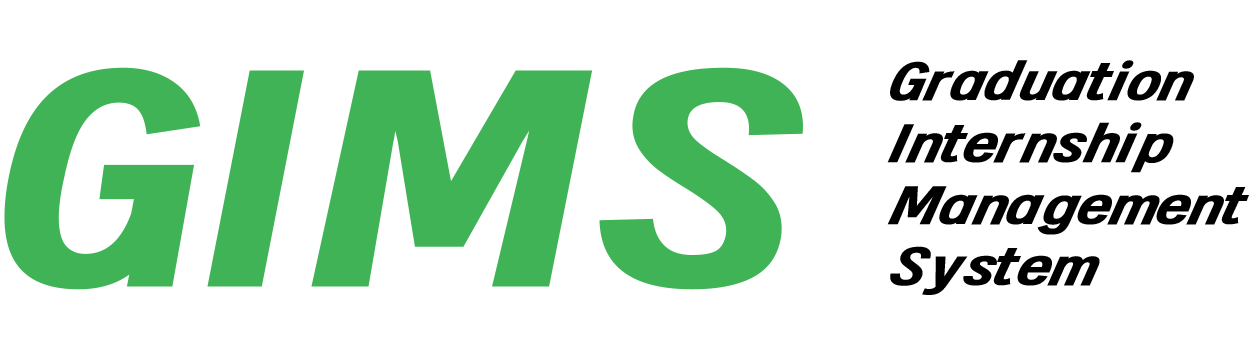
<style>
.page{position:relative;width:1250px;height:358px;background:#ffffff}
.page>*{position:absolute;margin:0}
.t1{font:49.1px/61.7px "zihunbiantaoti";letter-spacing:-0.06em;color:#000000;font-style:italic;scale:1.39 1}
.t2{font:278.3px "zihunbiantaoti";letter-spacing:-0.06em;color:#3fb355;scale:1.39 1}
</style>
<div class="page">
<p class="t1" style="left:887px;top:60px;width:362px;height:235px">Graduation<br>Internship<br>Management<br>System</p>
<p class="t2" style="left:4px;top:67px;width:799px;height:223px">GIMS</p>
</div>
